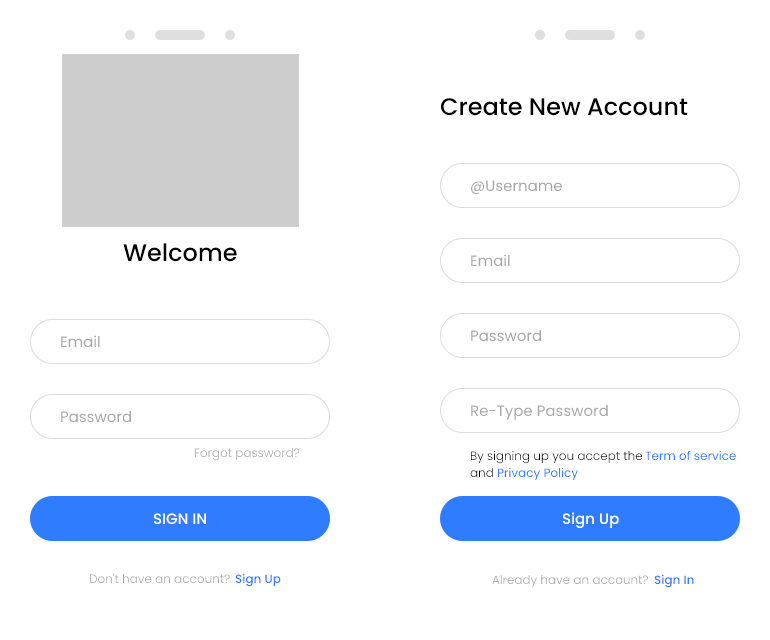
<style>
.page{position:relative;width:770px;height:640px;background:#ffffff}
.page>*{position:absolute;margin:0}
.t1{font:24px "Poppins-Medium";color:#000000}
.t2{font:15px "Poppins-Regular";color:#a7a7a7}
.t3{font:12px "Poppins-Light";color:#a5a5a5}
.t4{font:12px "Poppins-Light";color:#000000}
.t5{font:12px "Poppins-Regular";color:#307cff}
.t6{font:15px "Poppins-Medium";color:#ffffff}
.t7{font:12px "Poppins-Medium";color:#307cff}
</style>
<div class="page">
<p class="t1" style="left:440px;top:98px;width:248px;height:18px">Create New Account</p>
<p class="t2" style="left:471px;top:180px;width:91px;height:14px">@Username</p>
<p class="t1" style="left:123px;top:243px;width:114px;height:19px">Welcome</p>
<p class="t2" style="left:471px;top:254px;width:39px;height:13px">Email</p>
<p class="t2" style="left:471px;top:329px;width:70px;height:13px">Password</p>
<p class="t2" style="left:61px;top:335px;width:39px;height:13px">Email</p>
<p class="t2" style="left:61px;top:410px;width:70px;height:13px">Password</p>
<p class="t2" style="left:471px;top:404px;width:137px;height:16px">Re-Type Password</p>
<p class="t3" style="left:194px;top:448px;width:106px;height:13px">Forgot password?</p>
<p class="t4" style="left:470px;top:450px;width:173px;height:14px">By signing up you accept the</p>
<p class="t5" style="left:645px;top:450px;width:91px;height:11px">Term of service</p>
<p class="t4" style="left:470px;top:468px;width:23px;height:10px">and</p>
<p class="t5" style="left:497px;top:467px;width:81px;height:14px">Privacy Policy</p>
<p class="t6" style="left:153px;top:513px;width:53px;height:12px">SIGN IN</p>
<p class="t6" style="left:562px;top:512px;width:57px;height:17px">Sign Up</p>
<p class="t3" style="left:89px;top:573px;width:141px;height:11px">Don't have an account?</p>
<p class="t7" style="left:235px;top:573px;width:46px;height:14px">Sign Up</p>
<p class="t3" style="left:492px;top:575px;width:156px;height:13px">Already have an account?</p>
<p class="t7" style="left:654px;top:574px;width:40px;height:14px">Sign In</p>
</div>
